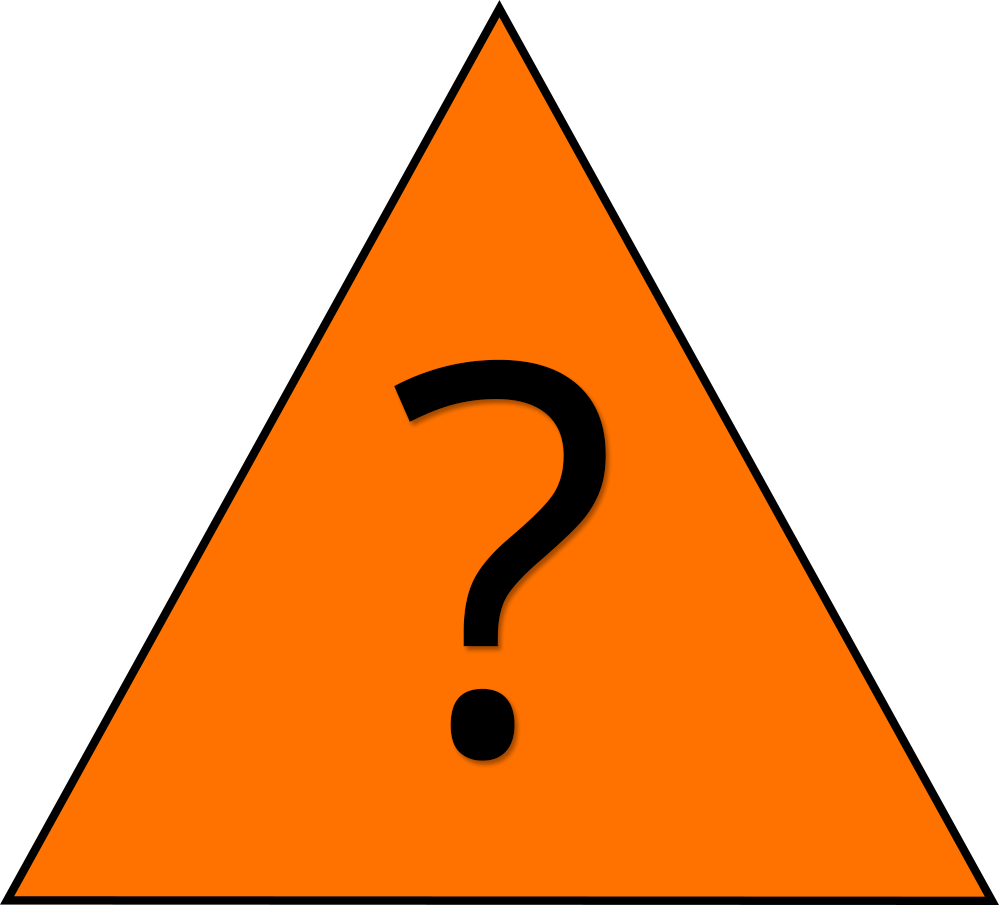
<style>
.page{position:relative;width:1000px;height:905px;background:#ffffff}
.page>*{position:absolute;margin:0}
.t1{font:542.6px "OpenSans";color:#000000}
</style>
<div class="page">
<p class="t1" style="left:394px;top:359px;width:212px;height:402px">?</p>
</div>
